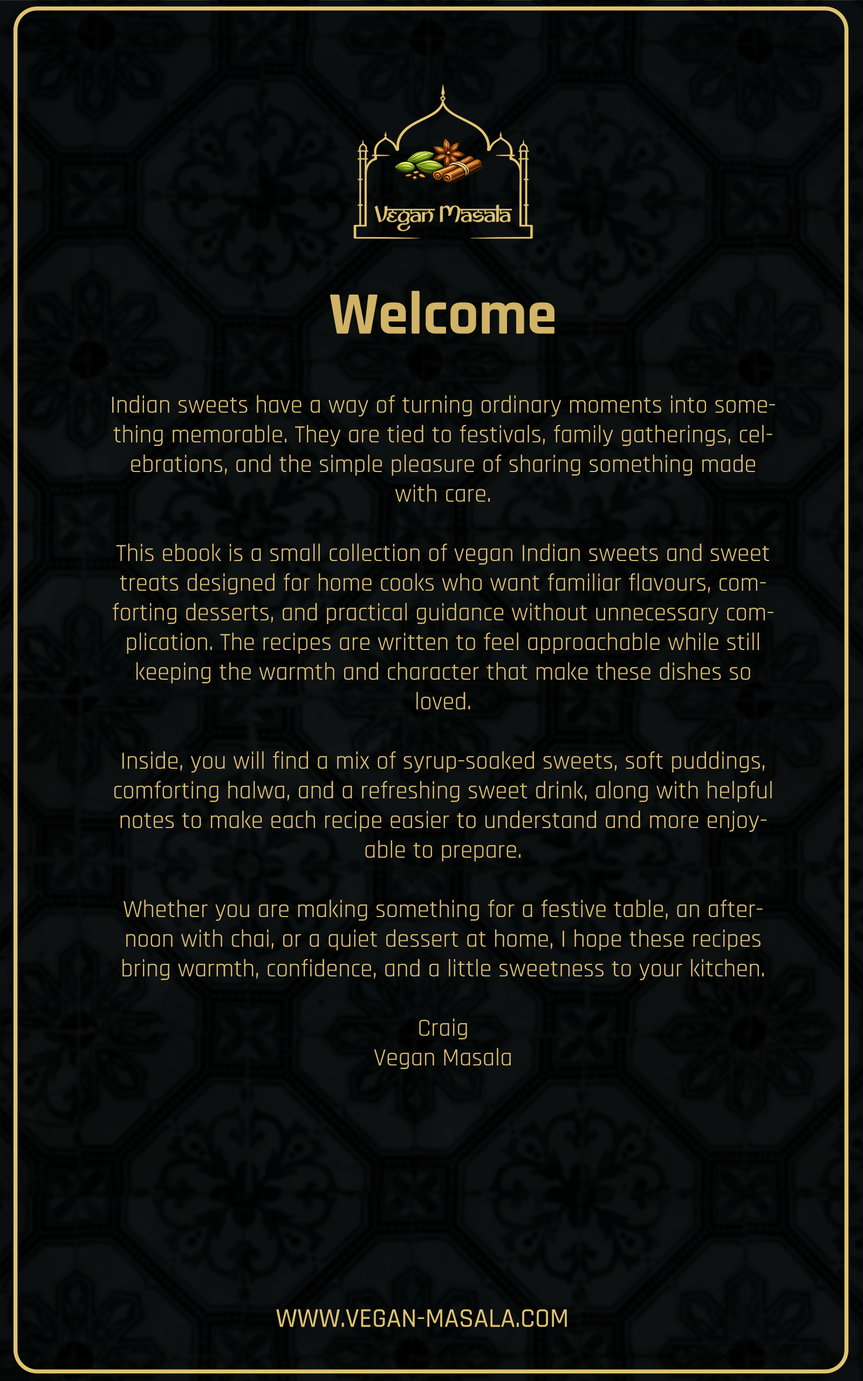
<style>
.page{position:relative;width:863px;height:1381px}
.page>*{position:absolute;margin:0}
.t1{font:60.5px "Rajdhani-Bold";color:#d1b366}
.t2{font:24.7px "Rajdhani-Regular";color:#d9bd74}
.t3{font:27px "Rajdhani-Medium";color:#dfc370}
</style>
<div class="page">
<p class="t1" style="left:330px;top:291px;width:225px;height:43px">Welcome</p>
<p class="t2" style="left:112px;top:395px;width:663px;height:674px;text-align:center">Indian sweets have a way of turning ordinary moments into something memorable. They are tied to festivals, family gatherings, celebrations, and the simple pleasure of sharing something made with care.<br><br>This ebook is a small collection of vegan Indian sweets and sweet treats designed for home cooks who want familiar flavours, comforting desserts, and practical guidance without unnecessary complication. The recipes are written to feel approachable while still keeping the warmth and character that make these dishes so loved.<br><br>Inside, you will find a mix of syrup-soaked sweets, soft puddings, comforting halwa, and a refreshing sweet drink, along with helpful notes to make each recipe easier to understand and more enjoyable to prepare.<br><br>Whether you are making something for a festive table, an afternoon with chai, or a quiet dessert at home, I hope these recipes bring warmth, confidence, and a little sweetness to your kitchen.<br><br>Craig  <br>Vegan Masala</p>
<p class="t3" style="left:276px;top:1310px;width:291px;height:17px">WWW.VEGAN-MASALA.COM</p>
</div>
